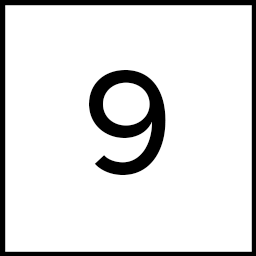
<style>
.page{position:relative;width:256px;height:256px;background:#ffffff}
.page>*{position:absolute;margin:0}
.t1{font:144px "FilsonProRegular";color:#000000}
</style>
<div class="page">
<p class="t1" style="left:89px;top:69px;width:77px;height:106px">9</p>
</div>
